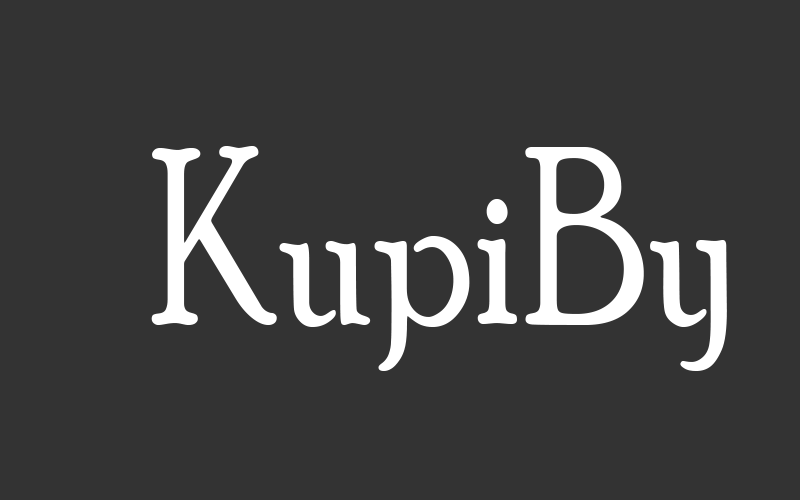
<style>
.page{position:relative;width:800px;height:500px;background:#333333}
.page>*{position:absolute;margin:0}
.t1{font:250px "PoorRichard-Regular";color:#ffffff;scale:0.79 1}
</style>
<div class="page">
<p class="t1" style="left:151px;top:146px;width:576px;height:225px">KupiBy</p>
</div>
